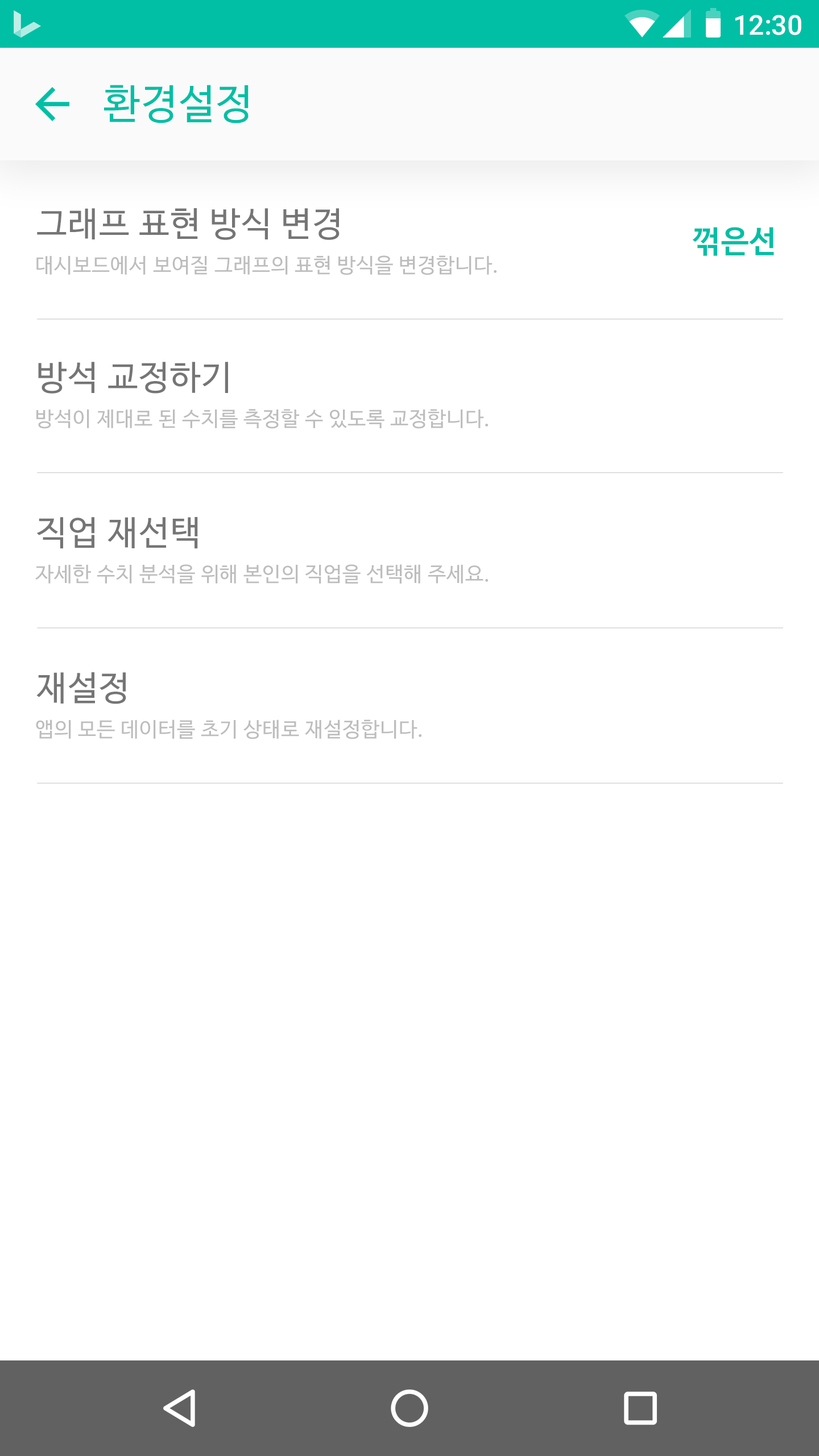
<style>
.page{position:relative;width:819px;height:1456px;background:#ffffff}
.page>*{position:absolute;margin:0}
.t1{font:27.3px "Roboto-Medium";color:#ffffff}
.t2{font:40.9px "NanumBarunGothic";letter-spacing:0.025em;color:#00bfa5}
.t3{font:34.1px "NanumBarunGothic";letter-spacing:0.025em;color:#757575}
.t4{font:30.7px "NanumBarunGothicBold";letter-spacing:0.025em;color:#00bfa5}
.t5{font:20.5px "NanumBarunGothic";letter-spacing:0.025em;color:#bdbdbd}
</style>
<div class="page">
<p class="t1" style="left:735px;top:15px;width:66px;height:20px">12:30</p>
<p class="t2" style="left:104px;top:85px;width:145px;height:38px">환경설정</p>
<p class="t3" style="left:37px;top:208px;width:303px;height:32px">그래프 표현 방식 변경</p>
<p class="t4" style="left:692px;top:227px;width:82px;height:29px">꺾은선</p>
<p class="t5" style="left:36px;top:255px;width:461px;height:20px">대시보드에서 보여질 그래프의 표현 방식을 변경합니다.</p>
<p class="t3" style="left:38px;top:362px;width:190px;height:32px">방석 교정하기</p>
<p class="t5" style="left:36px;top:409px;width:453px;height:20px">방석이 제대로 된 수치를 측정할 수 있도록 교정합니다.</p>
<p class="t3" style="left:36px;top:517px;width:162px;height:32px">직업 재선택</p>
<p class="t5" style="left:35px;top:564px;width:454px;height:20px">자세한 수치 분석을 위해 본인의 직업을 선택해 주세요.</p>
<p class="t3" style="left:36px;top:672px;width:90px;height:32px">재설정</p>
<p class="t5" style="left:36px;top:719px;width:386px;height:20px">앱의 모든 데이터를 초기 상태로 재설정합니다.</p>
</div>
